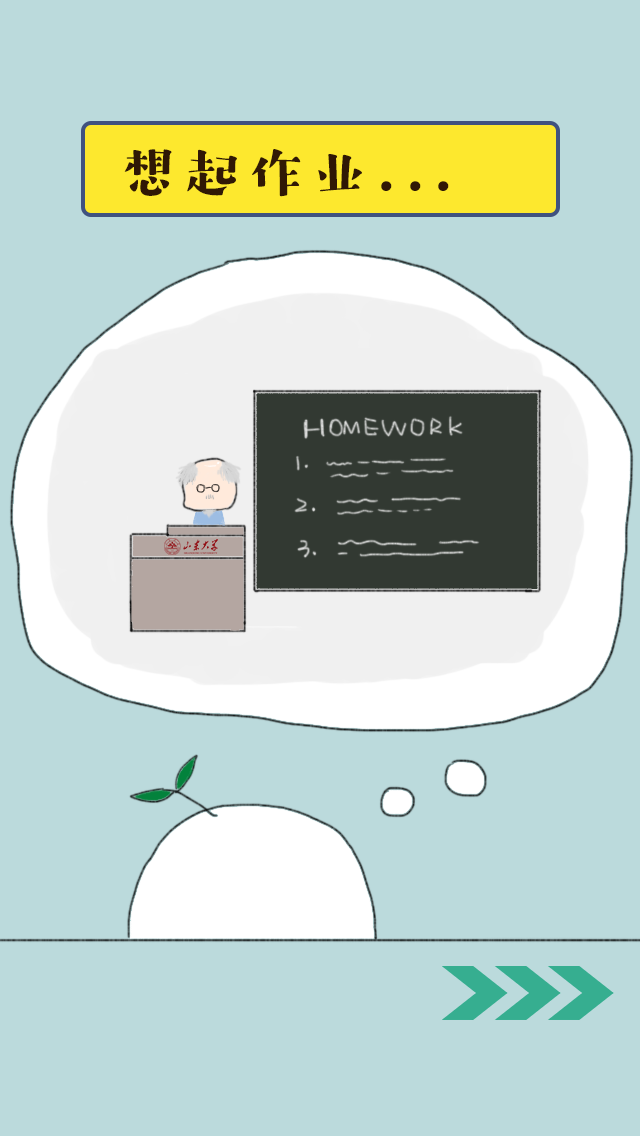
<style>
.page{position:relative;width:640px;height:1136px;background:#bbdadc}
.page>*{position:absolute;margin:0}
.t1{font:58.3px "HYZiYanHuanLeSongW";letter-spacing:0.1em;color:#301805}
</style>
<div class="page">
<p class="t1" style="left:124px;top:149px;width:325px;height:48px">想起作业...</p>
</div>
